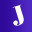
<style>
.page{position:relative;width:32px;height:32px}
.page>*{position:absolute;margin:0}
.t1{font:27px "AbrilFatface-Regular";color:#ffffff}
</style>
<div class="page">
<p class="t1" style="left:12px;top:4px;width:13px;height:23px;rotate:-17deg">J</p>
</div>
